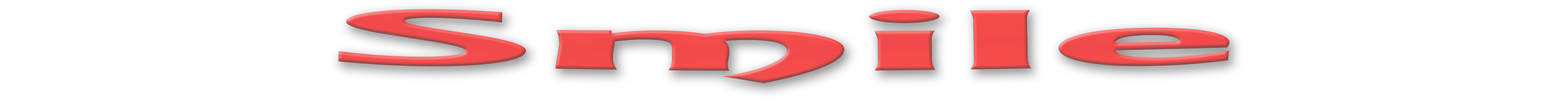
<style>
.page{position:relative;width:1568px;height:105px;background:#ffffff}
.page>*{position:absolute;margin:0}
.t1{font:81.6px "ARESSENCE";scale:6 1}
</style>
<div class="page">
<p class="t1" style="left:338px;top:9px;width:892px;height:74px">Smile</p>
</div>
